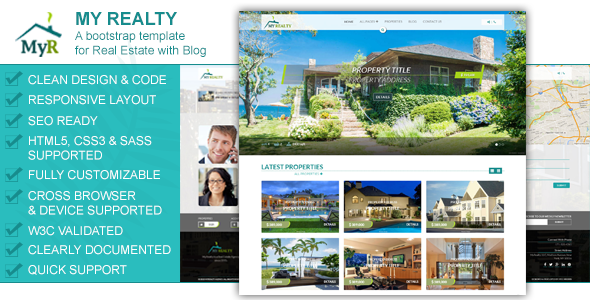
<style>
.page{position:relative;width:590px;height:300px}
.page>*{position:absolute;margin:0}
.t1{font:18px "Arial-BoldMT";color:#178c8d;text-transform:uppercase}
.t2{font:12px "ArialMT";color:#178c8d}
.t3{font:12px "ArialMT";color:#ffffff;text-transform:uppercase}
</style>
<div class="page">
<p class="t1" style="left:76px;top:12px;width:101px;height:13px">MY REALTY</p>
<p class="t2" style="left:75px;top:31px;width:131px;height:26px">A bootstrap template <br>for Real Estate with Blog</p>
<p class="t3" style="left:28px;top:75px;width:138px;height:10px">CLEAN DESIGN &amp; CODE</p>
<p class="t3" style="left:29px;top:95px;width:127px;height:10px">RESPONSIVE LAYOUT</p>
<p class="t3" style="left:28px;top:116px;width:70px;height:10px">SEO READY</p>
<p class="t3" style="left:28px;top:136px;width:124px;height:24px">HTML5, CSS3 &amp; SASS <br>SUPPORTED</p>
<p class="t3" style="left:29px;top:170px;width:131px;height:10px">FULLY CUSTOMIZABLE</p>
<p class="t3" style="left:28px;top:191px;width:134px;height:24px">CROSS BROWSER <br>&amp; DEVICE SUPPORTED</p>
<p class="t3" style="left:28px;top:226px;width:95px;height:10px">W3C VALIDATED</p>
<p class="t3" style="left:28px;top:245px;width:143px;height:10px">CLEARLY DOCUMENTED</p>
<p class="t3" style="left:28px;top:265px;width:99px;height:10px">QUICK SUPPORT</p>
</div>
